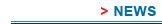
<style>
.page{position:relative;width:162px;height:24px;background:#ffffff}
.page>*{position:absolute;margin:0}
.t1{font:14px "Arial-BoldMT";letter-spacing:0.025em;color:#006fad}
.t2{font:14px "Arial-BoldMT";letter-spacing:0.025em;color:#ff0000}
</style>
<div class="page">
<p class="t1" style="left:101px;top:6px;width:55px;height:10px"><span class="t2">&gt; </span>NEWS</p>
</div>
